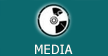
<style>
.page{position:relative;width:108px;height:56px;background:#0c696e}
.page>*{position:absolute;margin:0}
.t1{font:12.9px "Verdana";color:#fdfef9;scale:0.91 1}
</style>
<div class="page">
<p class="t1" style="left:35px;top:44px;width:38px;height:10px">MEDIA</p>
</div>
